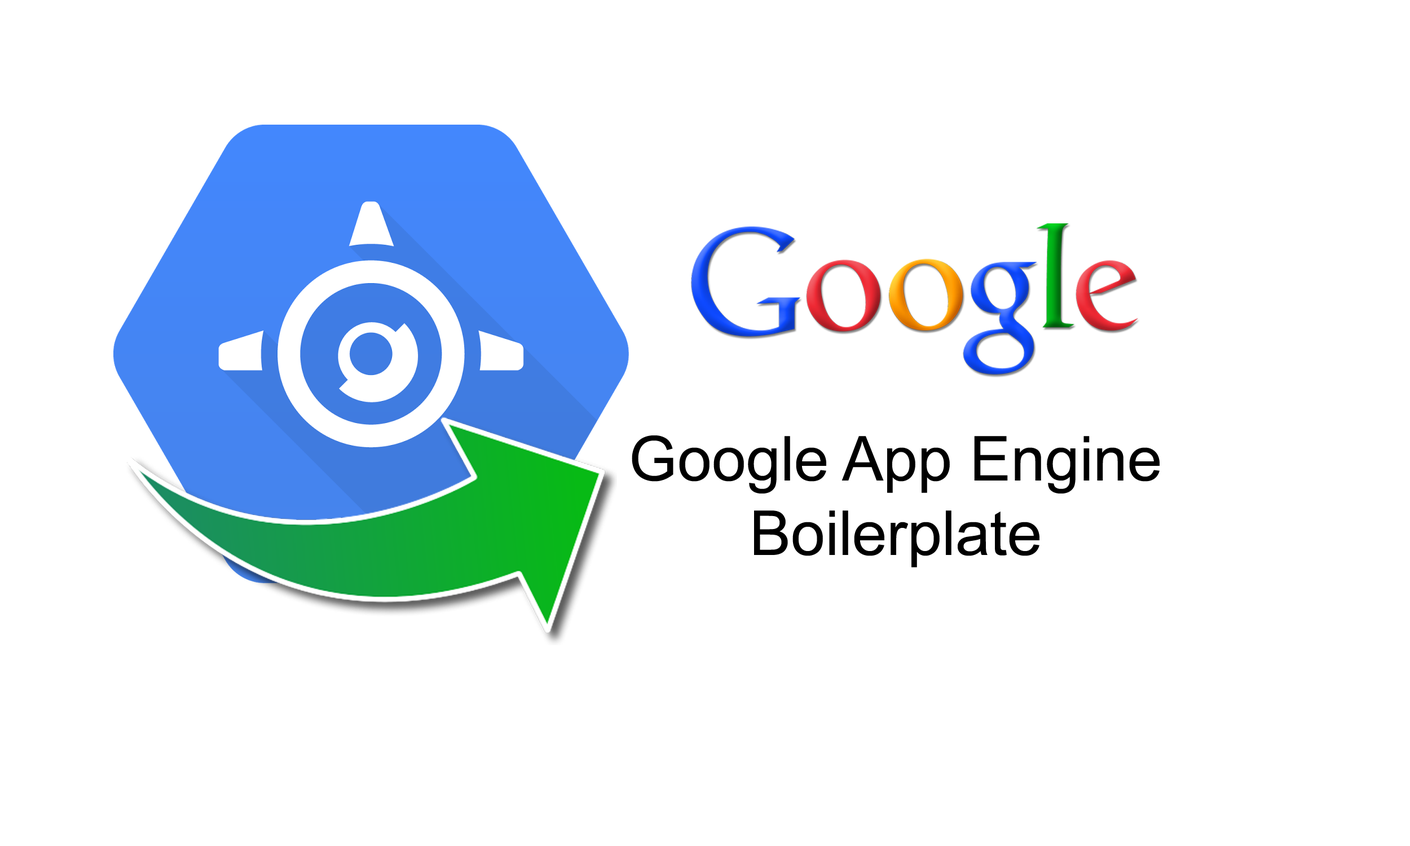
<style>
.page{position:relative;width:1410px;height:846px;background:#ffffff}
.page>*{position:absolute;margin:0}
.t1{font:62px "ArialMT";color:#000000}
</style>
<div class="page">
<p class="t1" style="left:632px;top:435px;width:527px;height:132px;text-align:center">Google App Engine<br>Boilerplate</p>
</div>
